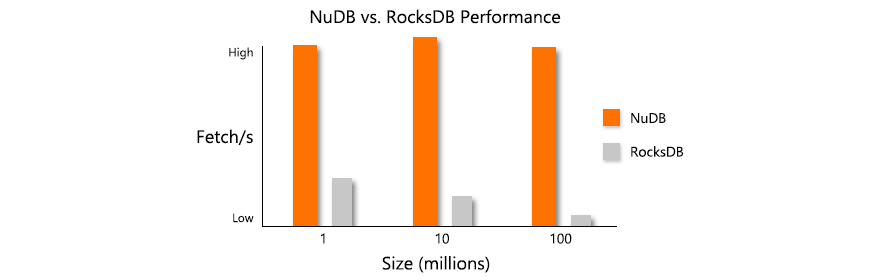
<style>
.page{position:relative;width:880px;height:280px;background:#ffffff}
.page>*{position:absolute;margin:0}
.t1{font:18px "Ebrima";color:#000000}
.t2{font:12px "Ebrima";color:#000000}
.t3{font:14px "Ebrima";color:#000000}
</style>
<div class="page">
<p class="t1" style="left:310px;top:9px;width:251px;height:15px">NuDB vs. RocksDB Performance</p>
<p class="t1" style="left:197px;top:47px;width:57px;height:176px;text-align:right"><span class="t2">High<br></span><br><br><br>Fetch/s<br><br><br><br><span class="t2">Low</span></p>
<p class="t3" style="left:631px;top:113px;width:53px;height:44px">NuDB<br><br>RocksDB</p>
<p class="t3" style="left:321px;top:233px;width:251px;height:11px">1                            10                          100</p>
<p class="t1" style="left:382px;top:256px;width:108px;height:17px">Size (millions)</p>
</div>
